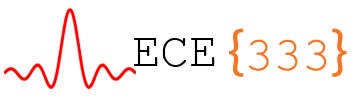
<style>
.page{position:relative;width:360px;height:101px;background:#ffffff}
.page>*{position:absolute;margin:0}
.t1{font:48px "CourierNewPSMT";color:#f37726}
.t2{font:60px "MyriadPro-Regular";color:#f37726}
.t3{font:48px "CourierNewPSMT";color:#000000}
</style>
<div class="page">
<p class="t1" style="left:229px;top:28px;width:118px;height:49px"><span class="t2">{</span>333<span class="t2">}</span></p>
<p class="t3" style="left:134px;top:38px;width:81px;height:29px">ECE</p>
</div>
